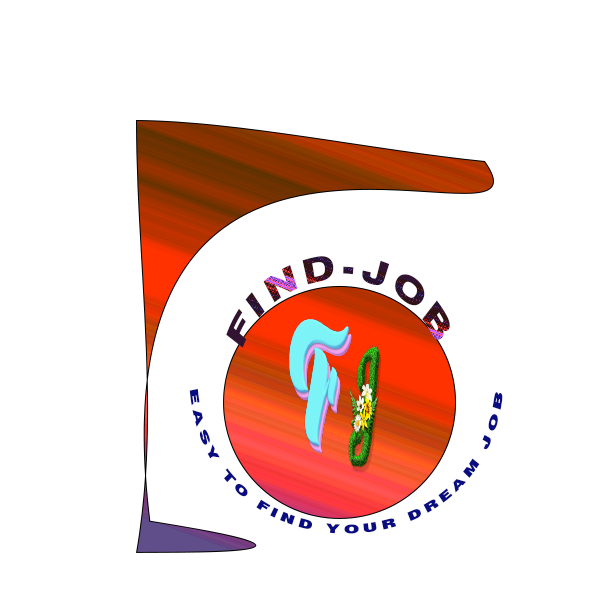
<style>
.page{position:relative;width:600px;height:600px;background:#ffffff}
.page>*{position:absolute;margin:0}
.t1{font:56.8px "Swiss721BT-Black";letter-spacing:0.16em;text-transform:uppercase;scale:0.44 1}
.t2{font:170.2px "PinkBluePersonalUse-Bold";letter-spacing:0.16em;text-transform:uppercase;scale:0.44 1}
.t3{font:170.2px "GlowbloomPersonalUse-Italic";letter-spacing:0.16em;text-transform:uppercase;scale:0.44 1}
.t4{font:28.4px/150px "Swiss721BT-Black";letter-spacing:0.16em;color:#0a0d81;text-transform:uppercase;scale:0.44 1}
</style>
<div class="page">
<p class="t1" style="left:226px;top:256px;width:224px;height:92px">Find-job</p>
<p class="t2" style="left:289px;top:319px;width:93px;height:155px">f<span class="t3">j</span></p>
<p class="t4" style="left:189px;top:388px;width:314px;height:146px;text-align:center">Easy to find your dream job</p>
</div>
